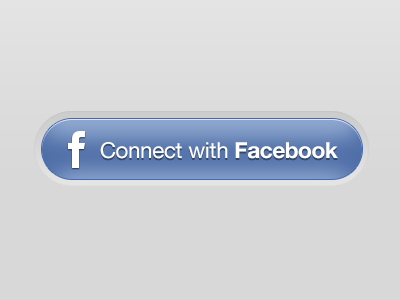
<style>
.page{position:relative;width:400px;height:300px;background:#d8d8d8}
.page>*{position:absolute;margin:0}
.t1{font:22px "HelveticaNeue";letter-spacing:-0.015em;color:#ffffff}
.t2{font:22px "HelveticaNeue-Bold";letter-spacing:-0.015em;color:#ffffff}
</style>
<div class="page">
<p class="t1" style="left:100px;top:142px;width:238px;height:17px">Connect with <span class="t2">Facebook</span></p>
</div>
